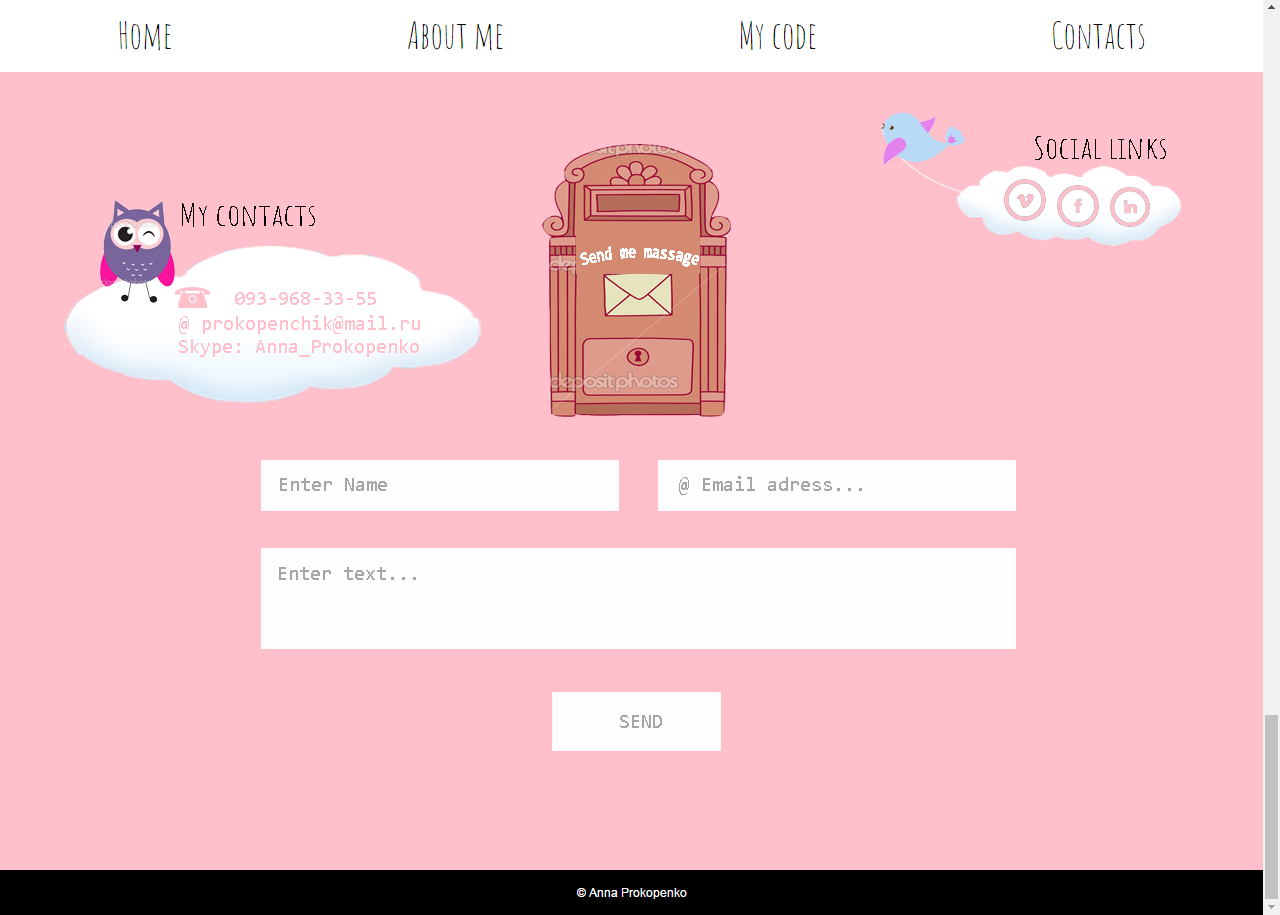
<style>
.page{position:relative;width:1280px;height:915px;background:#ffc0cb}
.page>*{position:absolute;margin:0}
.t1{font:30px "AmaticSC-Regular";color:#050505;scale:1.33 1}
.t2{font:20px "Consolas";color:#ffc0cb}
.t3{font:20px "Consolas";color:#a6a6a6}
</style>
<div class="page">
<p class="t1" style="left:1035px;top:136px;width:131px;height:24px">Social links</p>
<p class="t1" style="left:182px;top:203px;width:133px;height:24px">My contacts</p>
<p class="t2" style="left:235px;top:292px;width:141px;height:13px">093-968-33-55</p>
<p class="t2" style="left:179px;top:315px;width:241px;height:19px">@ prokopenchik@mail.ru</p>
<p class="t2" style="left:179px;top:339px;width:240px;height:18px">Skype: Anna_Prokopenko</p>
<p class="t3" style="left:280px;top:478px;width:107px;height:13px">Enter Name</p>
<p class="t3" style="left:679px;top:476px;width:183px;height:19px">@ Email adress...</p>
<p class="t3" style="left:279px;top:567px;width:137px;height:13px">Enter text...</p>
<p class="t3" style="left:620px;top:715px;width:42px;height:13px">SEND</p>
</div>
